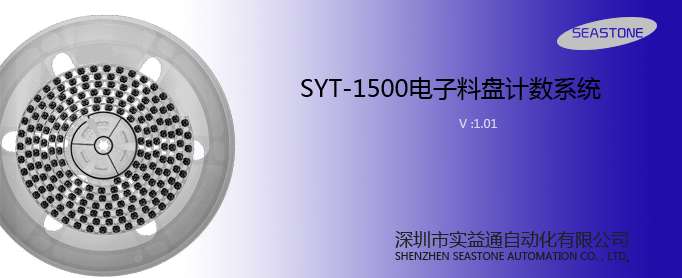
<style>
.page{position:relative;width:682px;height:278px}
.page>*{position:absolute;margin:0}
.t1{font:24px "MicrosoftYaHei";color:#000004}
.t2{font:12px "MicrosoftYaHei";color:#d9d9ed}
.t3{font:18px "MicrosoftYaHei";color:#211e1e}
.t4{font:10px "MicrosoftYaHei";color:#1d1a1a}
</style>
<div class="page">
<p class="t1" style="left:301px;top:77px;width:300px;height:23px">SYT-1500电子料盘计数系统</p>
<p class="t2" style="left:459px;top:119px;width:38px;height:9px">V :1.01</p>
<p class="t3" style="left:395px;top:231px;width:233px;height:17px">深圳市实益通自动化有限公司</p>
<p class="t4" style="left:395px;top:252px;width:235px;height:10px">SHENZHEN SEASTONE AUTOMATION CO.，LTD。</p>
</div>
